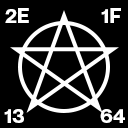
<style>
.page{position:relative;width:128px;height:128px;background:#000000}
.page>*{position:absolute;margin:0}
.t1{font:20px "NeueMontreal-Bold";letter-spacing:0.01em;color:#ffffff}
</style>
<div class="page">
<p class="t1" style="left:5px;top:8px;width:24px;height:15px">2E</p>
<p class="t1" style="left:101px;top:8px;width:20px;height:15px">1F</p>
<p class="t1" style="left:4px;top:109px;width:20px;height:14px">13</p>
<p class="t1" style="left:100px;top:109px;width:25px;height:14px">64</p>
</div>
